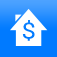
<style>
.page{position:relative;width:57px;height:57px;background:#007aff}
.page>*{position:absolute;margin:0}
.t1{font:22.3px "Roboto-Regular";color:#007aff;scale:1.15 1}
</style>
<div class="page">
<p class="t1" style="left:22px;top:20px;width:13px;height:21px">$</p>
</div>
